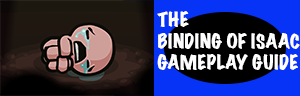
<style>
.page{position:relative;width:300px;height:96px;background:#0633f6}
.page>*{position:absolute;margin:0}
.t1{font:18px "MarkerFelt-Wide";color:#ffffff}
</style>
<div class="page">
<p class="t1" style="left:157px;top:11px;width:143px;height:59px">THE  <br>BINDING OF ISAAC<br>GAMEPLAY GUIDE</p>
</div>
